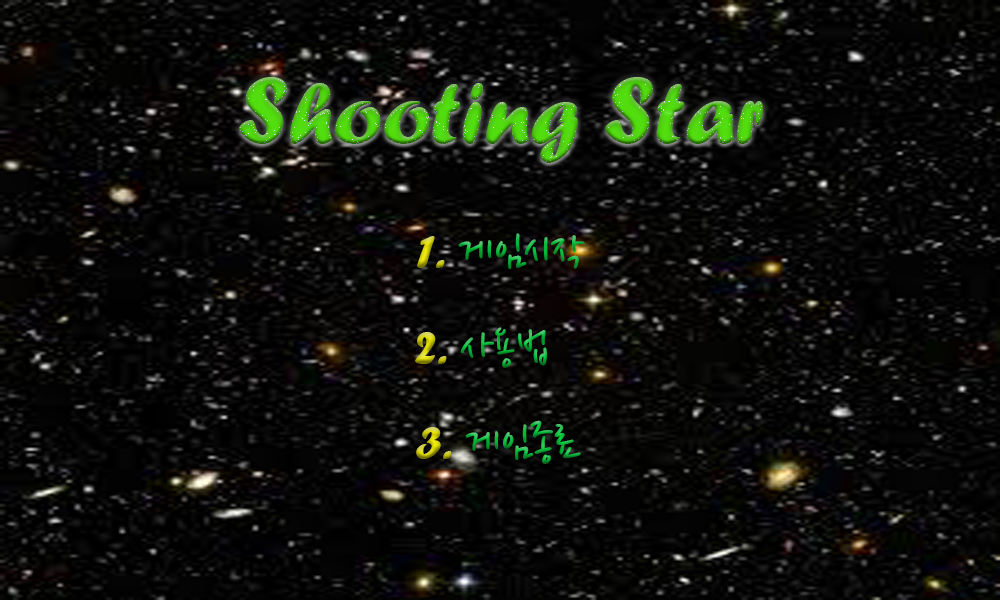
<style>
.page{position:relative;width:1000px;height:600px}
.page>*{position:absolute;margin:0}
.t1{font:90px "ForteMT"}
.t2{font:100px "ForteMT"}
.t3{font:50px "NanumPen"}
.t4{font:50px "ForteMT"}
</style>
<div class="page">
<p class="t1" style="left:239px;top:77px;width:524px;height:86px"><span class="t2">S</span>hooting <span class="t2">S</span>tar</p>
<p class="t3" style="left:417px;top:233px;width:168px;height:36px"><span class="t4">1. </span>게임시작</p>
<p class="t3" style="left:415px;top:327px;width:132px;height:41px"><span class="t4">2. </span>사용법</p>
<p class="t3" style="left:416px;top:420px;width:165px;height:44px"><span class="t4">3. </span>게임종료</p>
</div>
